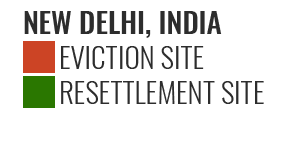
<style>
.page{position:relative;width:286px;height:149px;background:#ffffff}
.page>*{position:absolute;margin:0}
.t1{font:29.2px "Oswald-Medium";color:#2d2d2d;text-transform:uppercase}
.t2{font:29.2px "Oswald-Light";color:#2d2d2d;text-transform:uppercase}
</style>
<div class="page">
<p class="t1" style="left:24px;top:11px;width:198px;height:27px">New Delhi, India</p>
<p class="t2" style="left:61px;top:46px;width:143px;height:23px">Eviction site</p>
<p class="t2" style="left:61px;top:81px;width:203px;height:23px">resettlement site</p>
</div>
